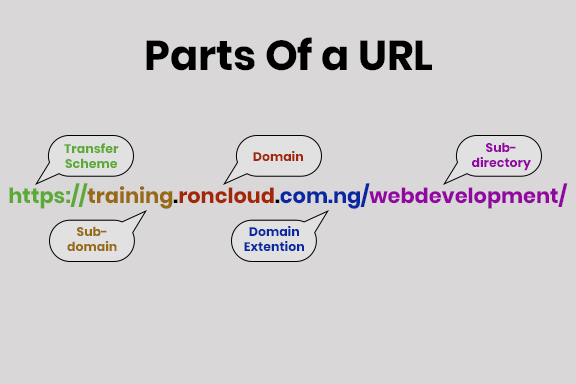
<style>
.page{position:relative;width:576px;height:384px;background:#d9d7d7}
.page>*{position:absolute;margin:0}
.t1{font:41.7px "Poppins-Bold";color:#000000}
.t2{font:12.5px "Poppins-Bold";color:#5ba937}
.t3{font:12.5px "Poppins-Bold";color:#9207a2}
.t4{font:12.5px "Poppins-Bold";color:#a22607}
.t5{font:20.8px "Poppins-Bold";color:#9207a2}
.t6{font:20.8px "Poppins-Bold";color:#5ba937}
.t7{font:20.8px "Poppins-Bold";color:#986a15}
.t8{font:20.8px "Poppins-Bold";color:#000000}
.t9{font:20.8px "Poppins-Bold";color:#a22607}
.t10{font:20.8px "Poppins-Bold";color:#0728a2}
.t11{font:12.5px "Poppins-Bold";color:#986a15}
.t12{font:12.5px "Poppins-Bold";color:#0728a2}
</style>
<div class="page">
<p class="t1" style="left:146px;top:37px;width:286px;height:34px">Parts Of a URL</p>
<p class="t2" style="left:64px;top:143px;width:55px;height:25px;text-align:center">Transfer<br>Scheme</p>
<p class="t3" style="left:472px;top:142px;width:59px;height:29px;text-align:center">Sub-<br>directory</p>
<p class="t4" style="left:253px;top:151px;width:50px;height:10px">Domain</p>
<p class="t5" style="left:9px;top:183px;width:559px;height:26px"><span class="t6">https://</span><span class="t7">training</span><span class="t8">.</span><span class="t9">roncloud</span><span class="t8">.</span><span class="t10">com.ng/</span>webdevelopment/</p>
<p class="t11" style="left:67px;top:226px;width:50px;height:25px;text-align:center">Sub-<br>domain</p>
<p class="t12" style="left:244px;top:226px;width:60px;height:25px;text-align:center">Domain<br>Extention</p>
</div>
